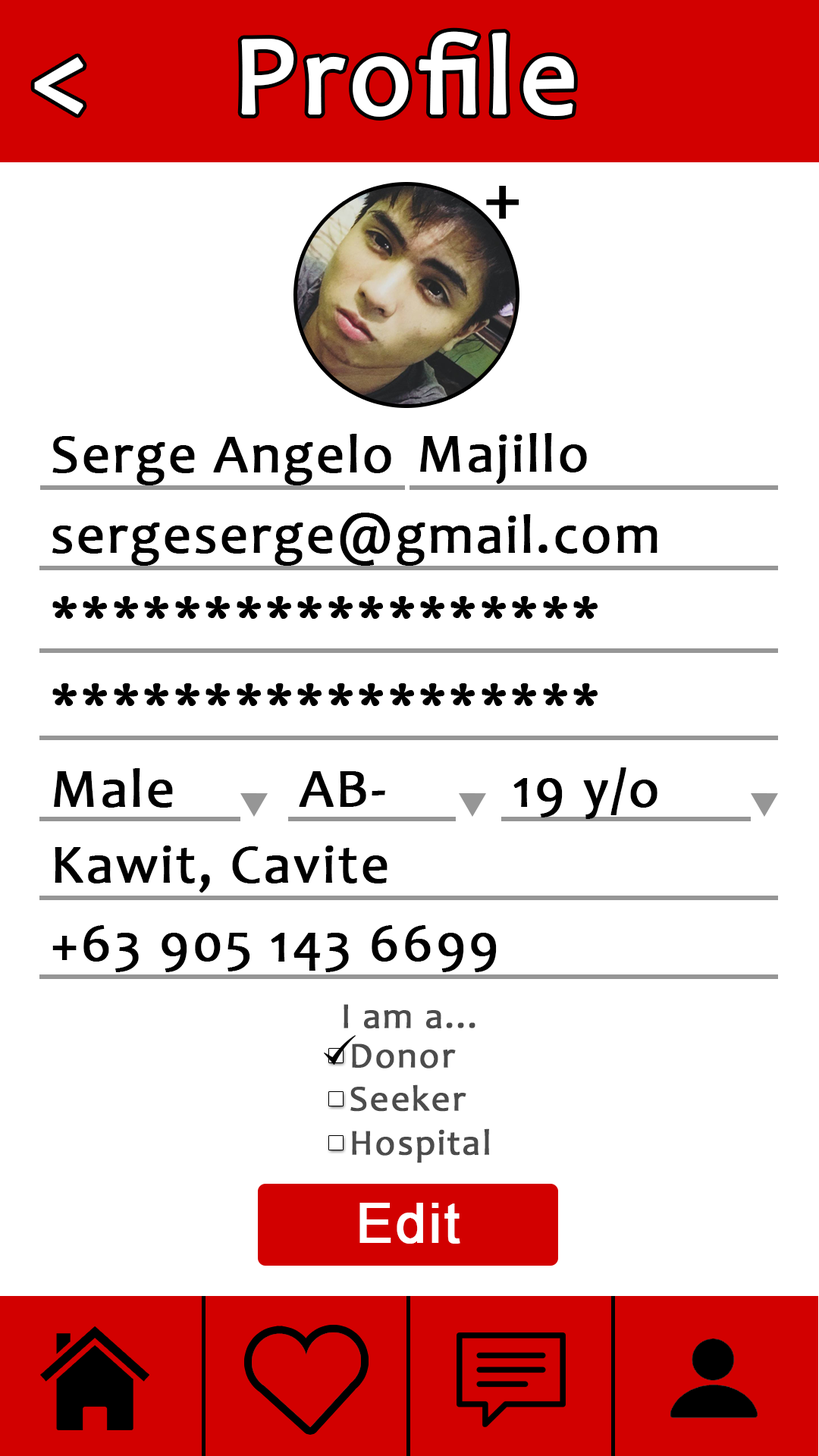
<style>
.page{position:relative;width:819px;height:1456px;background:#ffffff}
.page>*{position:absolute;margin:0}
.t1{font:113.4px "Candara";letter-spacing:0.03em;color:#ffffff;font-weight:bold}
.t2{font:113.7px "Candara";letter-spacing:0.03em;color:#ffffff;font-weight:bold}
.t3{font:75.8px "Candara";letter-spacing:0.03em;color:#000000;font-weight:bold}
.t4{font:54.6px "Candara";letter-spacing:0.03em;color:#000000;font-weight:bold}
.t5{font:36.4px "Candara";letter-spacing:0.03em;color:#4c4c4c;font-weight:bold}
.t6{font:54.6px "ArialMT";letter-spacing:0.03em;color:#ffffff;font-weight:bold}
</style>
<div class="page">
<p class="t1" style="left:241px;top:31px;width:333px;height:86px">Profile</p>
<p class="t2" style="left:34px;top:57px;width:49px;height:58px">&lt;</p>
<p class="t3" style="left:486px;top:186px;width:33px;height:33px">+</p>
<p class="t4" style="left:52px;top:434px;width:339px;height:51px">Serge Angelo</p>
<p class="t4" style="left:420px;top:433px;width:167px;height:51px">Majillo</p>
<p class="t4" style="left:52px;top:513px;width:605px;height:53px">sergeserge@gmail.com</p>
<p class="t4" style="left:52px;top:596px;width:546px;height:23px">******************</p>
<p class="t4" style="left:52px;top:683px;width:546px;height:23px">******************</p>
<p class="t4" style="left:54px;top:768px;width:119px;height:40px">Male</p>
<p class="t4" style="left:299px;top:771px;width:86px;height:36px">AB-</p>
<p class="t4" style="left:513px;top:767px;width:144px;height:52px">19 y/o</p>
<p class="t4" style="left:55px;top:846px;width:333px;height:47px">Kawit, Cavite</p>
<p class="t4" style="left:52px;top:925px;width:445px;height:47px">+63 905 143 6699</p>
<p class="t5" style="left:344px;top:1004px;width:131px;height:25px">I am a...</p>
<p class="t5" style="left:350px;top:1043px;width:139px;height:120px">Donor<br>Seeker<br>Hospital</p>
<p class="t6" style="left:359px;top:1203px;width:101px;height:41px">Edit</p>
</div>
